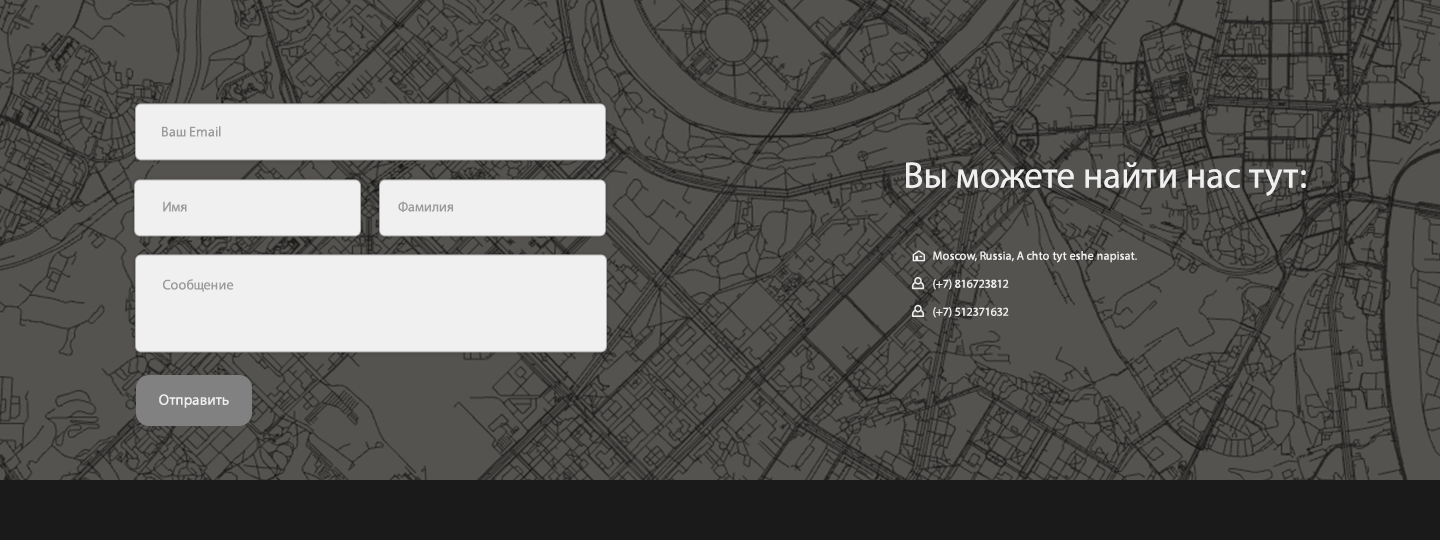
<style>
.page{position:relative;width:1440px;height:540px;background:#545350}
.page>*{position:absolute;margin:0}
.t1{font:14px "MyriadPro-Regular";color:#9a9a9a}
.t2{font:37px "MyriadPro-Regular";letter-spacing:0.01em;color:#ffffff}
.t3{font:12px/16px "MyriadPro-Regular";color:#ffffff}
.t4{font:12px/28px "MyriadPro-Regular";color:#ffffff}
.t5{font:15px "MyriadPro-Regular";color:#ffffff}
</style>
<div class="page">
<p class="t1" style="left:162px;top:126px;width:59px;height:11px">Ваш Email</p>
<p class="t2" style="left:906px;top:162px;width:400px;height:34px">Вы можете найти нас тут:</p>
<p class="t1" style="left:163px;top:201px;width:24px;height:11px">Имя</p>
<p class="t1" style="left:398px;top:201px;width:55px;height:11px">Фамилия</p>
<p class="t3" style="left:933px;top:251px;width:204px;height:67px">Moscow, Russia, A chto tyt eshe napisat.<br><span class="t4">(+7) 816723812<br>(+7) 512371632</span></p>
<p class="t1" style="left:163px;top:279px;width:71px;height:13px">Сообщение</p>
<p class="t5" style="left:159px;top:394px;width:70px;height:14px">Отправить</p>
</div>
